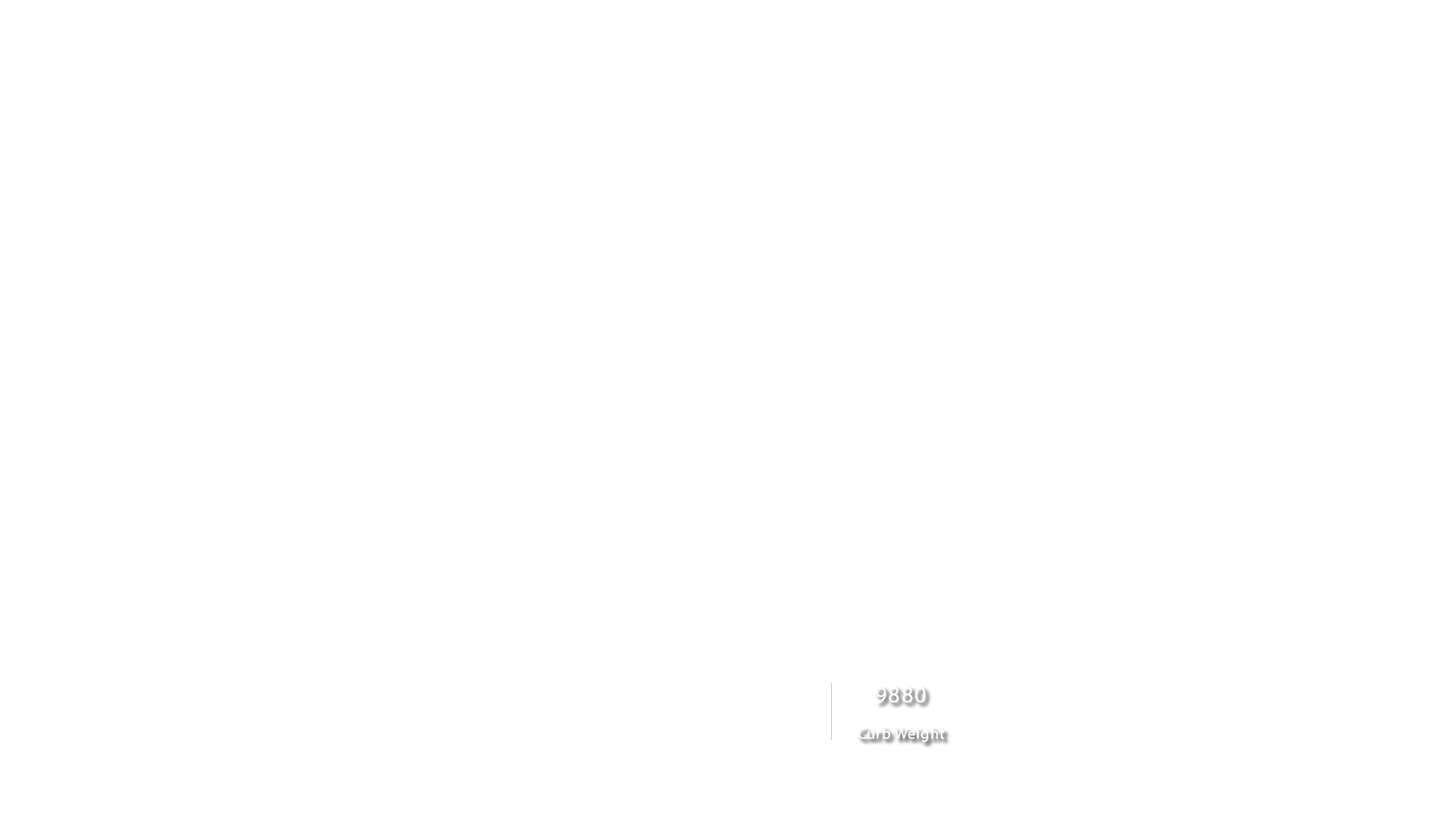
<style>
.page{position:relative;width:1456px;height:819px;background:#ffffff}
.page>*{position:absolute;margin:0}
.t1{font:22.7px "MyriadConceptRoman-Regular";letter-spacing:0.06em;color:#ffffff}
.t2{font:15px "MyriadConceptRoman-Regular";letter-spacing:0.06em;color:#ffffff}
</style>
<div class="page">
<p class="t1" style="left:876px;top:687px;width:50px;height:16px">9880</p>
<p class="t2" style="left:858px;top:727px;width:87px;height:15px;opacity:0.8">Curb Weight</p>
</div>
